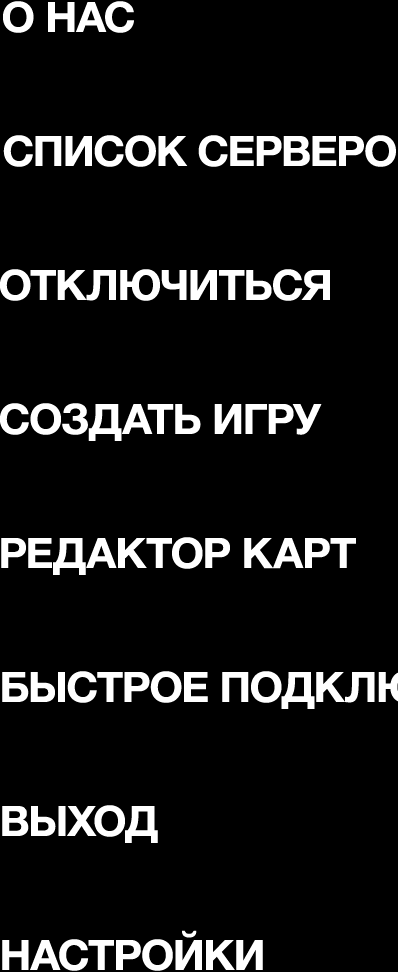
<style>
.page{position:relative;width:398px;height:972px;background:#000000}
.page>*{position:absolute;margin:0}
.t1{font:42px "HelveticaNeue-Bold";letter-spacing:-0.021em;color:#ffffff;scale:1.03 1}
</style>
<div class="page">
<p class="t1" style="left:3px;top:1px;width:131px;height:32px">О НАС</p>
<p class="t1" style="left:0px;top:269px;width:330px;height:32px">ОТКЛЮЧИТЬСЯ</p>
<p class="t1" style="left:0px;top:403px;width:322px;height:38px">СОЗДАТЬ ИГРУ</p>
<p class="t1" style="left:1px;top:537px;width:355px;height:38px">РЕДАКТОР КАРТ</p>
<p class="t1" style="left:2px;top:805px;width:156px;height:38px">ВЫХОД</p>
<p class="t1" style="left:2px;top:930px;width:261px;height:41px">НАСТРОЙКИ</p>
</div>
